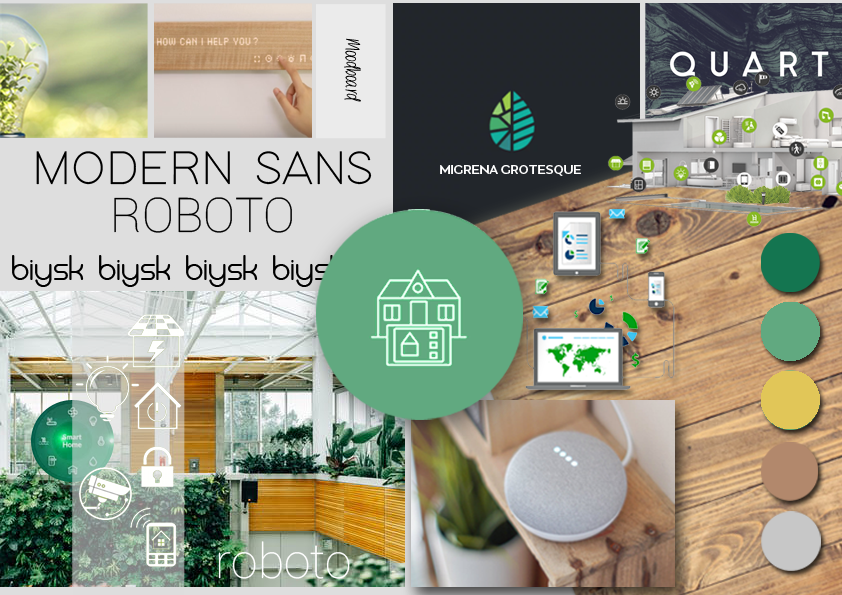
<style>
.page{position:relative;width:842px;height:595px}
.page>*{position:absolute;margin:0}
.t1{font:30px "AlwaysForever";color:#000000;font-style:italic}
.t2{font:36px/48px "Biysk-Regular";color:#000000}
.t3{font:48px/48px "ModernSansLight";color:#000000}
.t4{font:48px/48px "Roboto-Thin";color:#000000}
.t5{font:14px "Migrena_Grotesque-Medium";color:#ffffff}
.t6{font:48px "Roboto-Thin";color:#ffffff}
</style>
<div class="page">
<p class="t1" style="left:344px;top:38px;width:17px;height:64px;rotate:89deg">Moodboard</p>
<p class="t2" style="left:12px;top:151px;width:360px;height:136px;text-align:center"><span class="t3">MODERN SANS<br></span><span class="t4">ROBOTO<br></span>BIYSk BIYSK BIYSK BIYSK</p>
<p class="t5" style="left:440px;top:165px;width:141px;height:11px">MIGRENA GROTESQUE</p>
<p class="t6" style="left:218px;top:541px;width:132px;height:38px">roboto</p>
</div>
